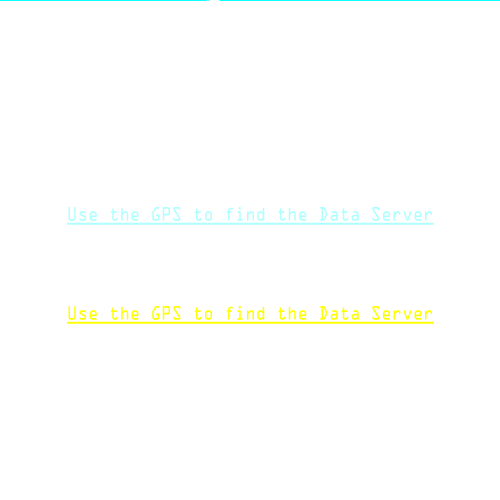
<style>
.page{position:relative;width:500px;height:500px;background:#ffffff}
.page>*{position:absolute;margin:0}
.t1{font:17.7px "OCRAStd";text-decoration:underline;scale:0.82 1}
</style>
<div class="page">
<p class="t1" style="left:67px;top:206px;width:367px;height:18px">Use the GPS to find the Data Server</p>
</div>
